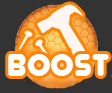
<style>
.page{position:relative;width:112px;height:93px;background:#333333}
.page>*{position:absolute;margin:0}
.t1{font:36px "Junegull";color:#ffffff}
</style>
<div class="page">
<p class="t1" style="left:8px;top:54px;width:101px;height:22px">BOOST</p>
</div>
